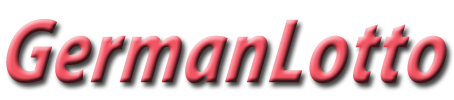
<style>
.page{position:relative;width:454px;height:100px;background:#ffffff}
.page>*{position:absolute;margin:0}
.t1{font:92px "MyriadPro-BoldIt";font-weight:bold;font-style:italic;scale:0.79 1}
</style>
<div class="page">
<p class="t1" style="left:6px;top:19px;width:441px;height:65px">GermanLotto</p>
</div>
